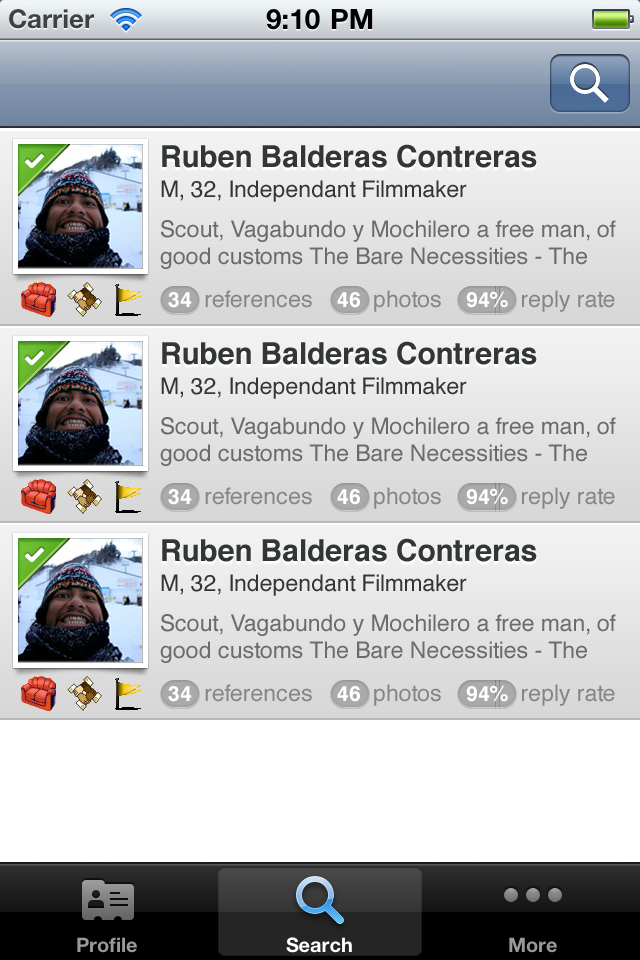
<style>
.page{position:relative;width:640px;height:960px}
.page>*{position:absolute;margin:0}
.t1{font:30px "Helvetica-Bold";color:#333637}
.t2{font:23px "Helvetica";color:#333637}
.t3{font:23px "Helvetica";color:#6b6b6b}
.t4{font:23px "Helvetica";color:#858585}
.t5{font:21px "Helvetica-Bold";color:#ffffff}
</style>
<div class="page">
<p class="t1" style="left:162px;top:144px;width:375px;height:24px">Ruben Balderas Contreras</p>
<p class="t2" style="left:161px;top:180px;width:306px;height:22px">M, 32, Independant Filmmaker</p>
<p class="t3" style="left:160px;top:220px;width:456px;height:49px">Scout, Vagabundo y Mochilero a free man, of good customs The Bare Necessities - The Jungle Book (1967)</p>
<p class="t4" style="left:168px;top:290px;width:447px;height:22px"><span class="t5">34</span>  references    <span class="t5">46  </span>photos    <span class="t5">94%</span>  reply rate</p>
<p class="t1" style="left:162px;top:341px;width:375px;height:24px">Ruben Balderas Contreras</p>
<p class="t2" style="left:161px;top:377px;width:306px;height:22px">M, 32, Independant Filmmaker</p>
<p class="t3" style="left:160px;top:417px;width:456px;height:49px">Scout, Vagabundo y Mochilero a free man, of good customs The Bare Necessities - The Jungle Book (1967)</p>
<p class="t4" style="left:168px;top:487px;width:447px;height:22px"><span class="t5">34</span>  references    <span class="t5">46  </span>photos    <span class="t5">94%</span>  reply rate</p>
<p class="t1" style="left:162px;top:538px;width:375px;height:24px">Ruben Balderas Contreras</p>
<p class="t2" style="left:161px;top:574px;width:306px;height:22px">M, 32, Independant Filmmaker</p>
<p class="t3" style="left:160px;top:614px;width:456px;height:49px">Scout, Vagabundo y Mochilero a free man, of good customs The Bare Necessities - The Jungle Book (1967)</p>
<p class="t4" style="left:168px;top:684px;width:447px;height:22px"><span class="t5">34</span>  references    <span class="t5">46  </span>photos    <span class="t5">94%</span>  reply rate</p>
</div>
